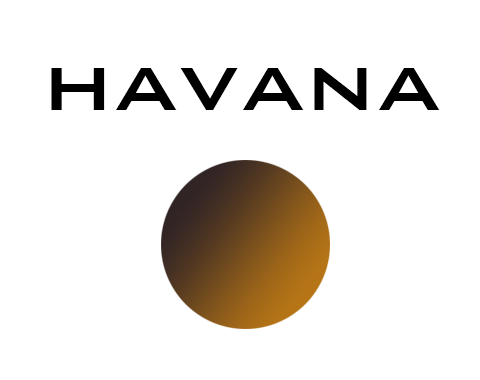
<style>
.page{position:relative;width:480px;height:380px;background:#ffffff}
.page>*{position:absolute;margin:0}
.t1{font:99.6px "BankGothicBT-Medium";color:#000000}
</style>
<div class="page">
<p class="t1" style="left:51px;top:68px;width:389px;height:42px">havana</p>
</div>
